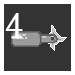
<style>
.page{position:relative;width:75px;height:75px;background:#333333}
.page>*{position:absolute;margin:0}
.t1{font:36px "FangSong";color:#ffffff;font-weight:bold}
</style>
<div class="page">
<p class="t1" style="left:5px;top:13px;width:18px;height:26px">4</p>
</div>
